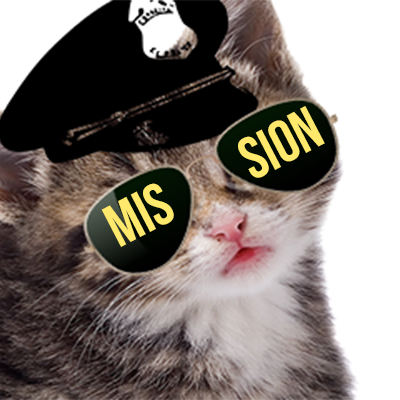
<style>
.page{position:relative;width:400px;height:400px;background:#ffffff}
.page>*{position:absolute;margin:0}
.t1{font:60px "BebasNeue";color:#fee96c}
</style>
<div class="page">
<p class="t1" style="left:238px;top:106px;width:87px;height:72px;rotate:-27deg">SION</p>
<p class="t1" style="left:101px;top:183px;width:73px;height:64px;rotate:-27deg">MIS</p>
</div>
